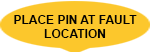
<style>
.page{position:relative;width:150px;height:52px;background:#fcc72c}
.page>*{position:absolute;margin:0}
.t1{font:12px "Arial-BoldMT";color:#030303}
</style>
<div class="page">
<p class="t1" style="left:14px;top:15px;width:123px;height:23px;text-align:center">PLACE PIN AT FAULT<br>LOCATION</p>
</div>
